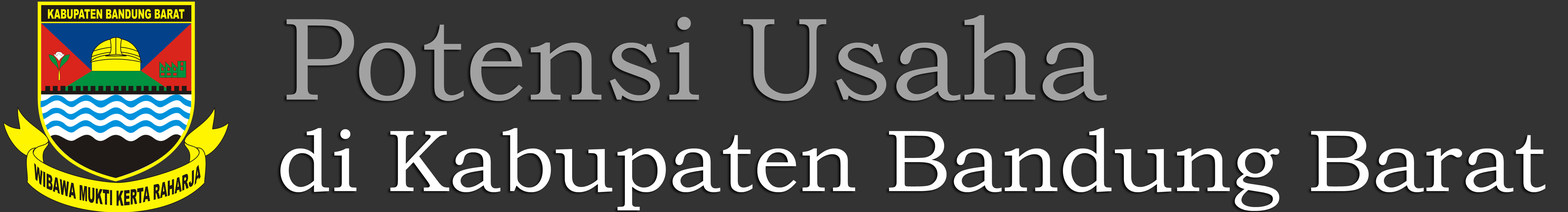
<style>
.page{position:relative;width:1568px;height:212px;background:#333333}
.page>*{position:absolute;margin:0}
.t1{font:118px "BookmanOldStyle";color:#a2a2a2}
.t2{font:88px "BookmanOldStyle";color:#ffffff}
</style>
<div class="page">
<p class="t1" style="left:286px;top:15px;width:821px;height:86px">Potensi Usaha</p>
<p class="t2" style="left:280px;top:128px;width:1265px;height:83px">di Kabupaten Bandung Barat</p>
</div>
